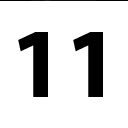
<style>
.page{position:relative;width:128px;height:128px;background:#ffffff}
.page>*{position:absolute;margin:0}
.t1{font:99.7px "MyriadHebrew-Bold";color:#000000}
</style>
<div class="page">
<p class="t1" style="left:18px;top:31px;width:85px;height:65px">11</p>
</div>
